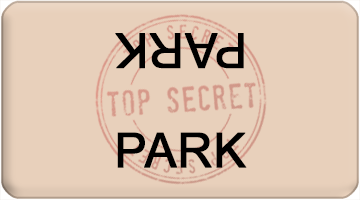
<style>
.page{position:relative;width:360px;height:200px;background:#e8d0bb}
.page>*{position:absolute;margin:0}
.t1{font:48px "ArialMT";color:#000000;font-weight:bold}
</style>
<div class="page">
<p class="t1" style="left:115px;top:33px;width:129px;height:36px;rotate:180deg">PARK</p>
<p class="t1" style="left:117px;top:132px;width:130px;height:36px">PARK</p>
</div>
